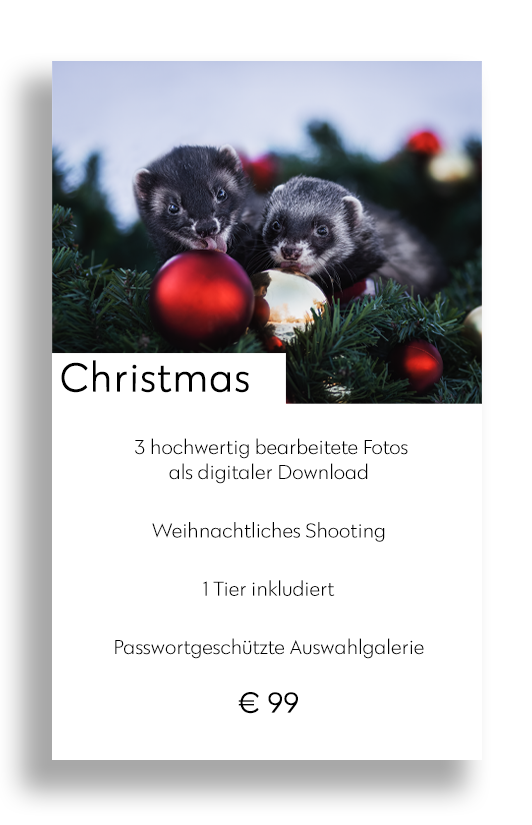
<style>
.page{position:relative;width:532px;height:825px;background:#ffffff}
.page>*{position:absolute;margin:0}
.t1{font:41.7px "Klik-Light";color:#000000;font-weight:bold}
.t2{font:20.8px/58.3px "Klik-Light";color:#000000}
.t3{font:20.8px/54.2px "Klik-Light";color:#000000}
.t4{font:20.8px "Klik-Light";color:#000000}
.t5{font:29.2px/58.3px "Klik-Light";color:#000000;font-weight:bold}
</style>
<div class="page">
<p class="t1" style="left:61px;top:360px;width:188px;height:33px">Christmas</p>
<p class="t2" style="left:115px;top:438px;width:309px;height:276px;text-align:center"><span class="t3"> 3 hochwertig bearbeitete Fotos<br></span><span class="t4">als digitaler Download<br></span>Weihnachtliches Shooting<br>1 Tier inkludiert<br>Passwortgeschützte Auswahlgalerie<br><span class="t5">€ 99</span></p>
</div>
